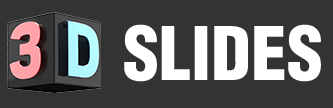
<style>
.page{position:relative;width:333px;height:108px;background:#333333}
.page>*{position:absolute;margin:0}
.t1{font:72px "Helvetica-CondensedBlack";color:#ffffff}
</style>
<div class="page">
<p class="t1" style="left:124px;top:24px;width:197px;height:58px">SLIDES</p>
</div>
